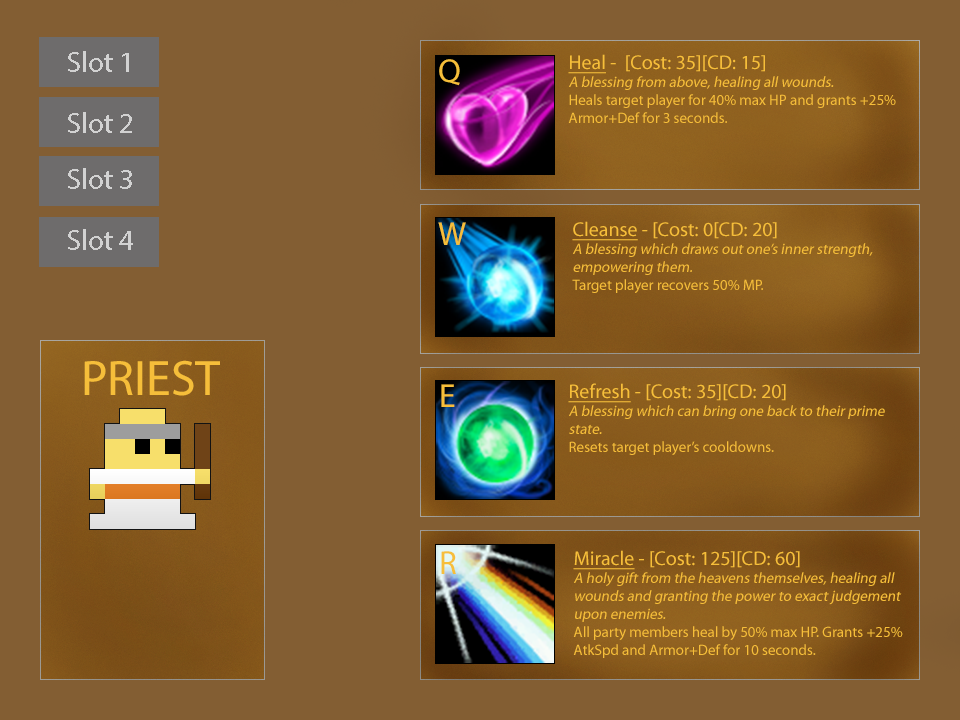
<style>
.page{position:relative;width:960px;height:720px;background:#835e33}
.page>*{position:absolute;margin:0}
.t1{font:29.2px "MyriadPro-Regular";color:#d2d2d2}
.t2{font:125px "MyriadPro-Regular";color:#ffffff}
.t3{font:15px "MyriadPro-Regular";color:#f6be3a}
.t4{font:20px "MyriadPro-Regular";color:#f6be3a;text-decoration:underline}
.t5{font:20px "MyriadPro-Regular";color:#f6be3a}
.t6{font:15px "MyriadPro-Regular";color:#f6be3a;font-style:italic}
.t7{font:33.2px "MyriadPro-Regular";color:#f6be3a}
.t8{font:50px "MyriadPro-Regular";color:#f6be3a}
</style>
<div class="page">
<p class="t1" style="left:68px;top:51px;width:61px;height:21px;text-align:center">Slot 1<br><span class="t2">hERO</span></p>
<p class="t3" style="left:568px;top:54px;width:328px;height:69px"><span class="t4">Heal</span><span class="t5"> -  [Cost: 35][CD: 15]<br></span><span class="t6">A blessing from above, healing all wounds.<br></span>Heals target player for 40% max HP and grants +25% Armor+Def for 3 seconds.</p>
<p class="t7" style="left:439px;top:59px;width:21px;height:27px">Q</p>
<p class="t1" style="left:68px;top:112px;width:64px;height:21px;text-align:center">Slot 2<br><span class="t2">hERO</span></p>
<p class="t1" style="left:68px;top:168px;width:64px;height:21px;text-align:center">Slot 3<br><span class="t2">hERO</span></p>
<p class="t7" style="left:438px;top:222px;width:28px;height:23px">W</p>
<p class="t6" style="left:572px;top:221px;width:301px;height:72px"><span class="t4">Cleanse</span><span class="t5"> - [Cost: 0[CD: 20]<br></span>A blessing which draws out one’s inner strength, empowering them.<br><span class="t3">Target player recovers 50% MP.</span></p>
<p class="t1" style="left:68px;top:229px;width:65px;height:21px;text-align:center">Slot 4<br><span class="t2">hERO</span></p>
<p class="t8" style="left:84px;top:360px;width:136px;height:36px">PRIEST</p>
<p class="t7" style="left:441px;top:384px;width:14px;height:23px">E</p>
<p class="t6" style="left:568px;top:383px;width:317px;height:72px"><span class="t4">Refresh</span><span class="t5"> - [Cost: 35][CD: 20]<br></span>A blessing which can bring one back to their prime state.<br><span class="t3">Resets target player’s cooldowns.</span></p>
<p class="t7" style="left:441px;top:551px;width:15px;height:23px">R</p>
<p class="t6" style="left:573px;top:550px;width:330px;height:108px"><span class="t4">Miracle</span><span class="t5"> - [Cost: 125][CD: 60]<br></span>A holy gift from the heavens themselves, healing all wounds and granting the power to exact judgement upon enemies.<br><span class="t3">All party members heal by 50% max HP. Grants +25% AtkSpd and Armor+Def for 10 seconds.</span></p>
</div>
